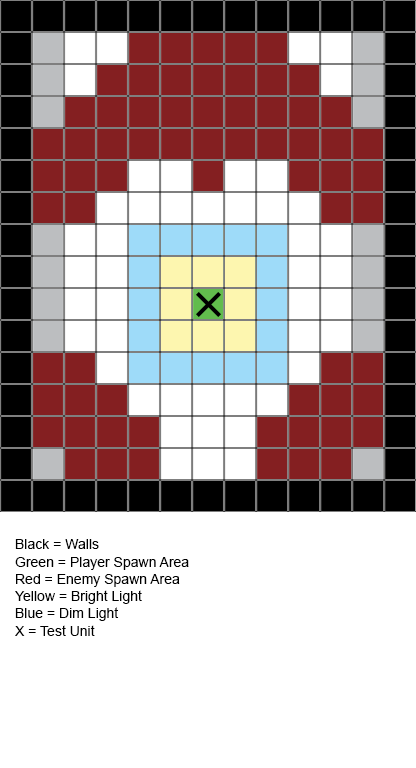
<style>
.page{position:relative;width:416px;height:768px;background:#ffffff}
.page>*{position:absolute;margin:0}
.t1{font:14.4px "ArialMT";color:#000000}
</style>
<div class="page">
<p class="t1" style="left:15px;top:539px;width:174px;height:97px">Black = Walls<br>Green = Player Spawn Area<br>Red = Enemy Spawn Area<br>Yellow = Bright Light<br>Blue = Dim Light<br>X = Test Unit</p>
</div>
